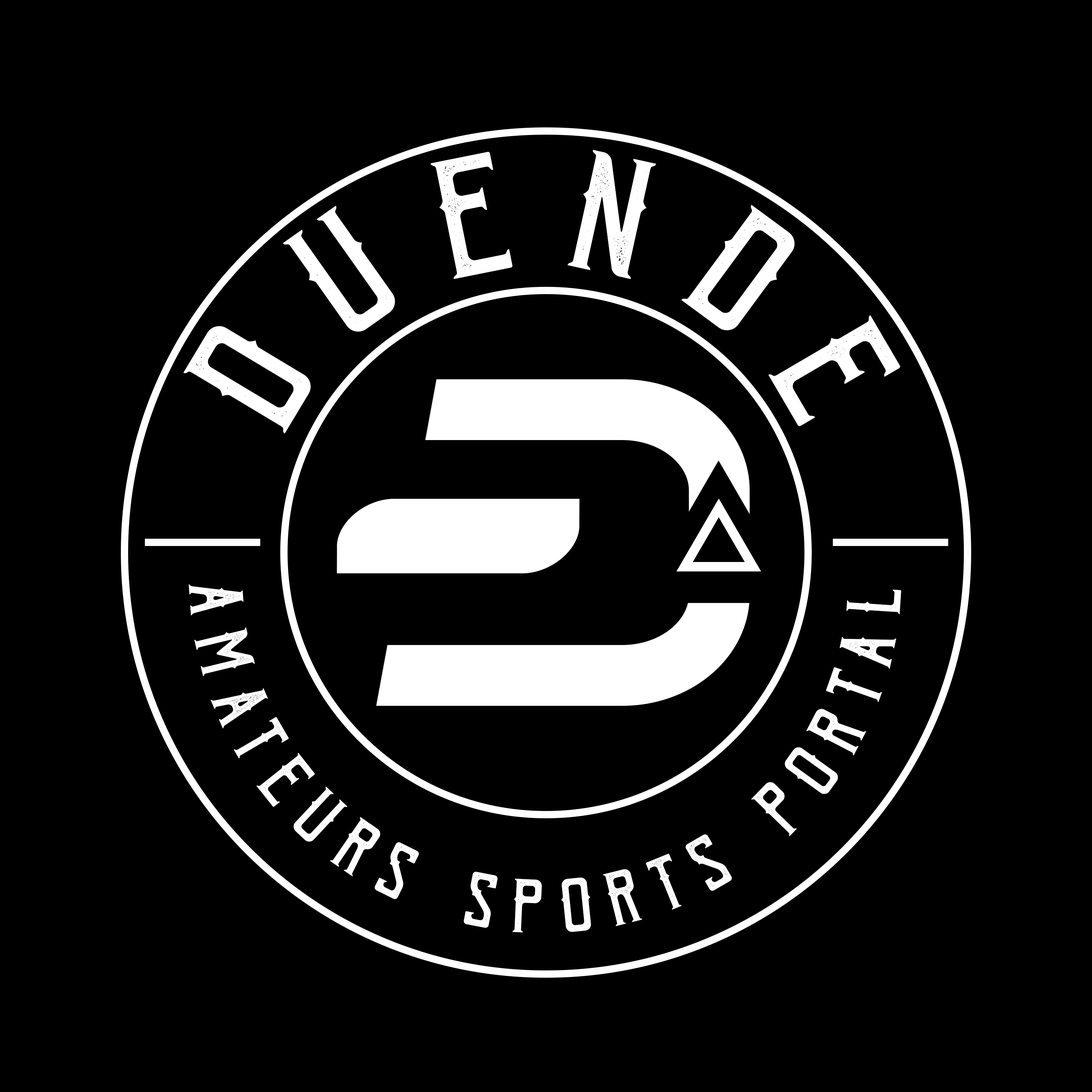
<style>
.page{position:relative;width:1092px;height:1092px;background:#000000}
.page>*{position:absolute;margin:0}
.t1{font:138.4px "BohemPress";letter-spacing:0.32em;color:#ffffff;font-weight:bold}
.t2{font:62.5px "BohemPress";letter-spacing:0.32em;color:#ffffff;font-weight:bold}
</style>
<div class="page">
<p class="t1" style="left:183px;top:150px;width:717px;height:284px;rotate:-46deg">duende</p>
<p class="t2" style="left:189px;top:584px;width:712px;height:349px;rotate:-65deg">Amateurs Sports Portal</p>
</div>
